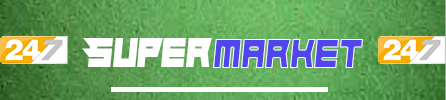
<style>
.page{position:relative;width:446px;height:100px}
.page>*{position:absolute;margin:0}
.t1{font:41.7px "Hindsight2020";color:#ffffff;scale:0.92 1}
.t2{font:41.7px "Hindsight2020";color:#5145ed;scale:0.92 1}
</style>
<div class="page">
<p class="t1" style="left:82px;top:38px;width:130px;height:29px">Super</p>
<p class="t2" style="left:213px;top:39px;width:150px;height:29px">market</p>
</div>
